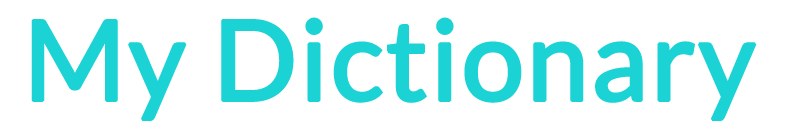
<style>
.page{position:relative;width:787px;height:139px;background:#ffffff}
.page>*{position:absolute;margin:0}
.t1{font:111.1px "Lato-Regular";color:#1bd3d5;font-weight:bold}
</style>
<div class="page">
<p class="t1" style="left:31px;top:17px;width:726px;height:104px">My Dictionary</p>
</div>
